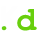
<style>
.page{position:relative;width:38px;height:38px;background:#ffffff}
.page>*{position:absolute;margin:0}
.t1{font:32.7px "CourierNewPS-BoldMT";color:#68cf0d}
.t2{font:30px "CourierNewPS-BoldMT";color:#68cf0d}
</style>
<div class="page">
<p class="t1" style="left:17px;top:9px;width:20px;height:22px">d</p>
<p class="t2" style="left:1px;top:26px;width:6px;height:5px">.</p>
</div>
